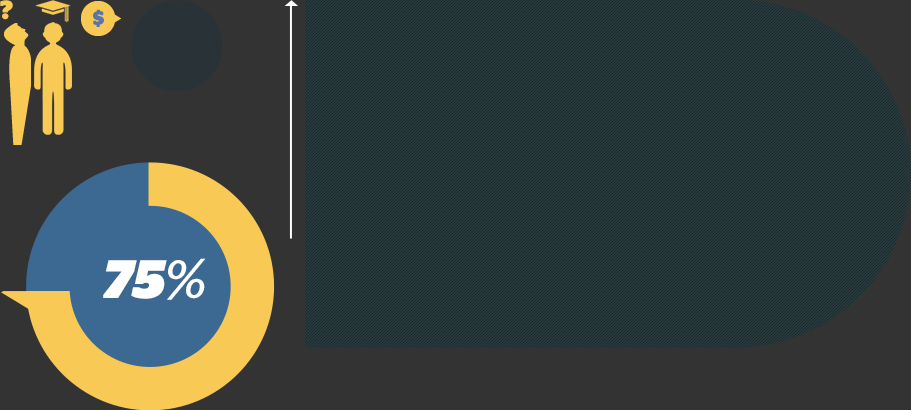
<style>
.page{position:relative;width:911px;height:410px;background:#243b3f}
.page>*{position:absolute;margin:0}
.t1{font:26.5px "StagSans-Black";letter-spacing:0.01em;color:#f9c956}
.t2{font:19.9px "StagSans-Black";letter-spacing:-0.005em;color:#5675a9;text-transform:uppercase}
.t3{font:54.1px "StagSans-BlackItalic";letter-spacing:-0.005em;color:#ffffff;text-transform:uppercase}
.t4{font:54.1px "StagSans-BookItalic";letter-spacing:-0.005em;color:#ffffff;text-transform:uppercase}
</style>
<div class="page">
<p class="t1" style="left:0px;top:0px;width:13px;height:20px">?</p>
<p class="t2" style="left:93px;top:9px;width:11px;height:18px">$</p>
<p class="t3" style="left:103px;top:258px;width:103px;height:42px">75<span class="t4">%</span></p>
</div>
